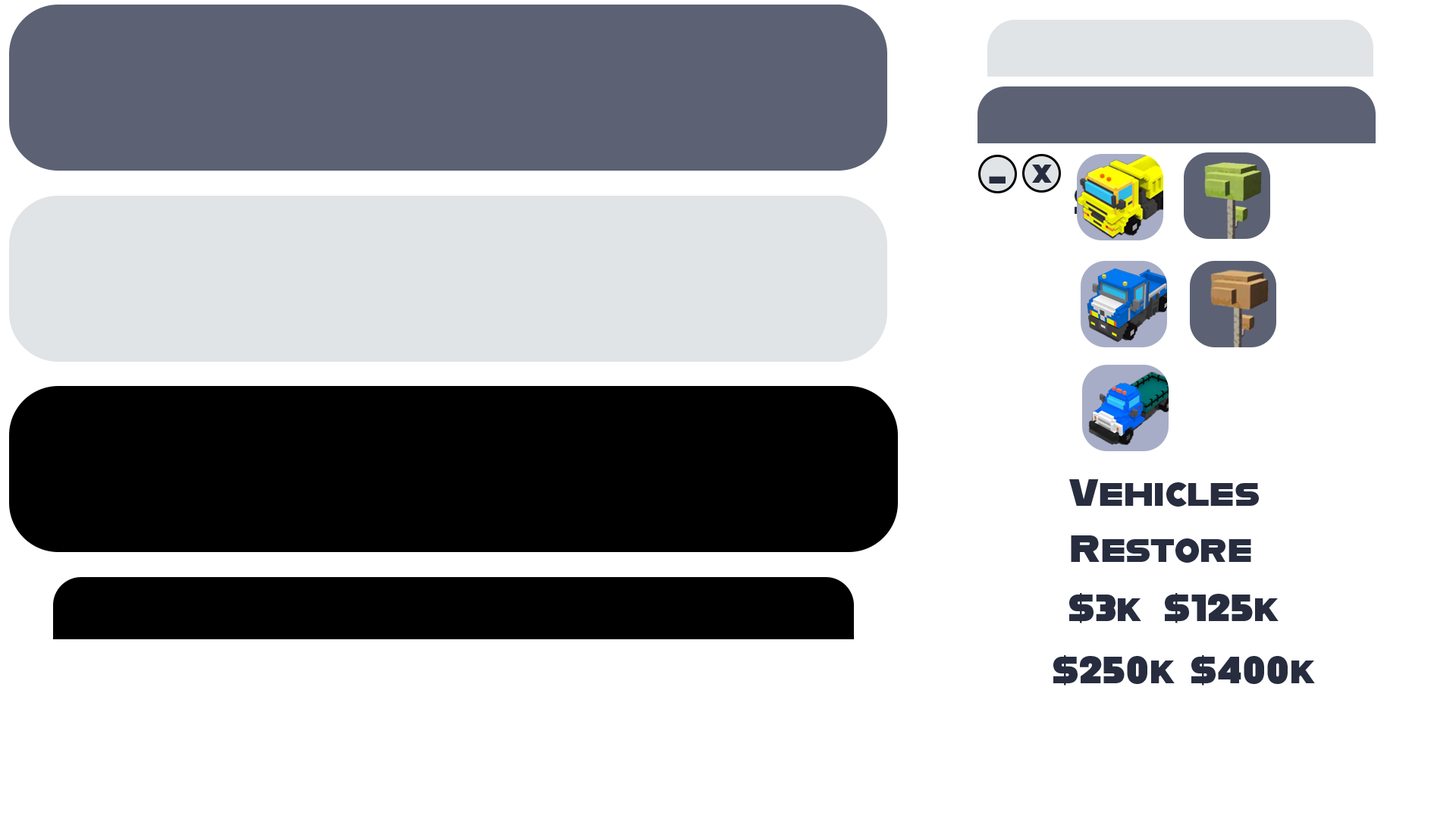
<style>
.page{position:relative;width:1456px;height:819px;background:#ffffff}
.page>*{position:absolute;margin:0}
.t1{font:25.3px "Alfarn";color:#272d3f}
.t2{font:38.1px "Alfarn";color:#272d3f}
.t3{font:37.9px "Alfarn";color:#272d3f}
</style>
<div class="page">
<p class="t1" style="left:1032px;top:165px;width:20px;height:18px">X</p>
<p class="t2" style="left:989px;top:176px;width:17px;height:8px">-</p>
<p class="t3" style="left:1069px;top:479px;width:190px;height:28px">Vehicles</p>
<p class="t3" style="left:1071px;top:535px;width:180px;height:28px">Restore</p>
<p class="t3" style="left:1069px;top:593px;width:72px;height:30px">$3k</p>
<p class="t3" style="left:1165px;top:593px;width:114px;height:30px">$125k</p>
<p class="t3" style="left:1053px;top:655px;width:122px;height:31px">$250k</p>
<p class="t3" style="left:1191px;top:655px;width:124px;height:31px">$400k</p>
</div>
